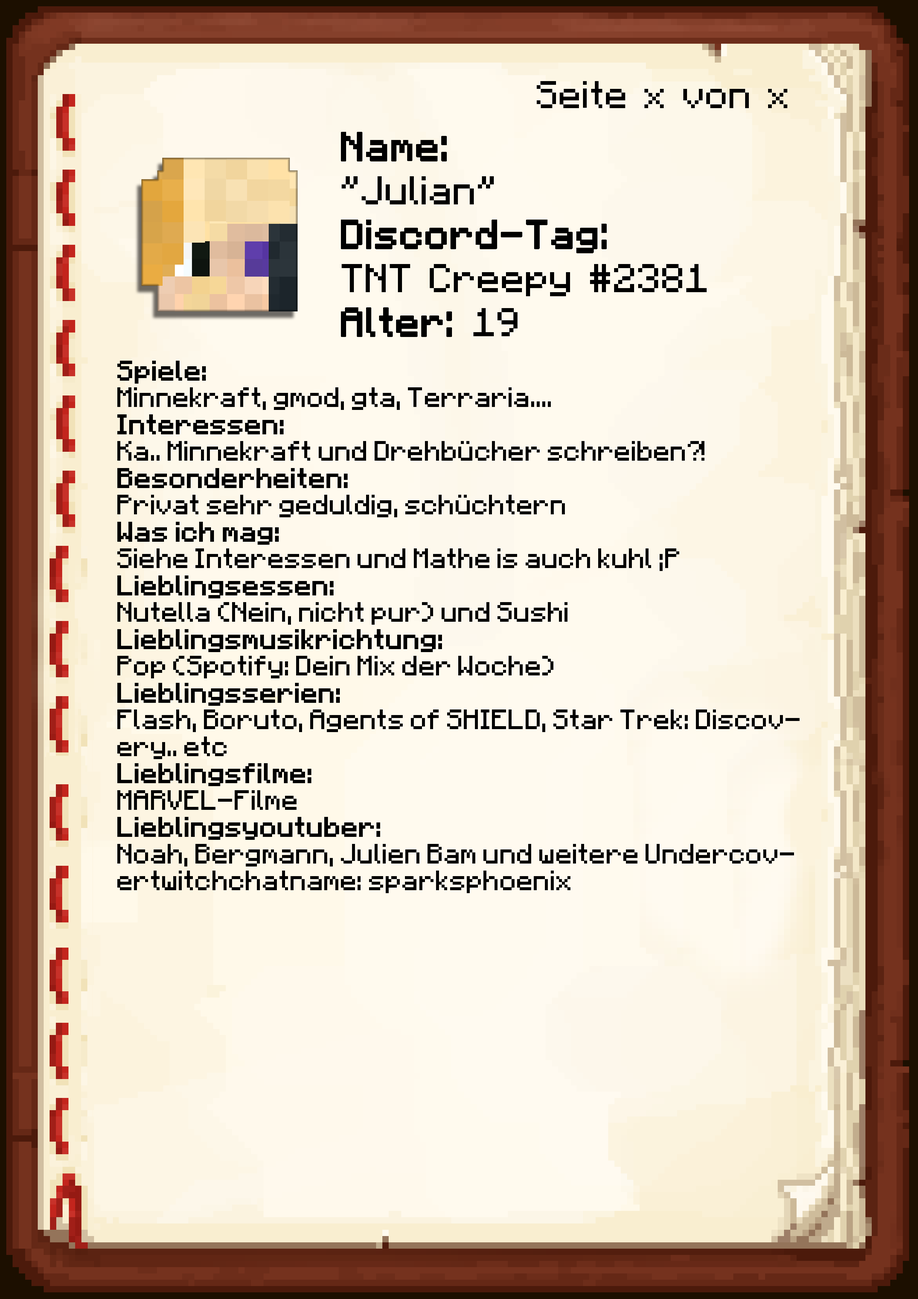
<style>
.page{position:relative;width:918px;height:1299px}
.page>*{position:absolute;margin:0}
.t1{font:38.6px "Minecraft-Regular";color:#000000}
.t2{font:40.1px/43.9px "Minecraft-Regular";color:#000000}
.t3{font:40.1px/43.9px "Minecraft-Regular";color:#000000;font-weight:bold}
.t4{font:22.4px "Minecraft";color:#000000}
.t5{font:22.4px "Minecraft";color:#000000;font-weight:bold}
</style>
<div class="page">
<p class="t1" style="left:537px;top:81px;width:250px;height:27px">Seite x von x</p>
<p class="t2" style="left:341px;top:132px;width:366px;height:205px"><span class="t3">Name:<br></span>"Julian"<br><span class="t3">Discord-Tag:<br></span>TNT Creepy #2381<br><span class="t3">Alter: </span>19</p>
<p class="t4" style="left:117px;top:361px;width:683px;height:532px"><span class="t5">Spiele: <br></span>Minnekraft, gmod, gta, Terraria....<br><span class="t5">Interessen:<br></span>Ka.. Minnekraft und Drehbücher schreiben?!<br><span class="t5">Besonderheiten:<br></span>Privat sehr geduldig, schüchtern<br><span class="t5">Was ich mag:<br></span>Siehe Interessen und Mathe is auch kuhl ;P<br><span class="t5">Lieblingsessen:<br></span>Nutella (Nein, nicht pur) und Sushi<br><span class="t5">Lieblingsmusikrichtung:<br></span>Pop (Spotify: Dein Mix der Woche)<br><span class="t5">Lieblingsserien:<br></span>Flash, Boruto, Agents of SHIELD, Star Trek: Discovery.. etc<br><span class="t5">Lieblingsfilme:<br></span>MARVEL-Filme<br><span class="t5">Lieblingsyoutuber:<br></span>Noah, Bergmann, Julien Bam und weitere Undercovertwitchchatname: sparksphoenix</p>
</div>
